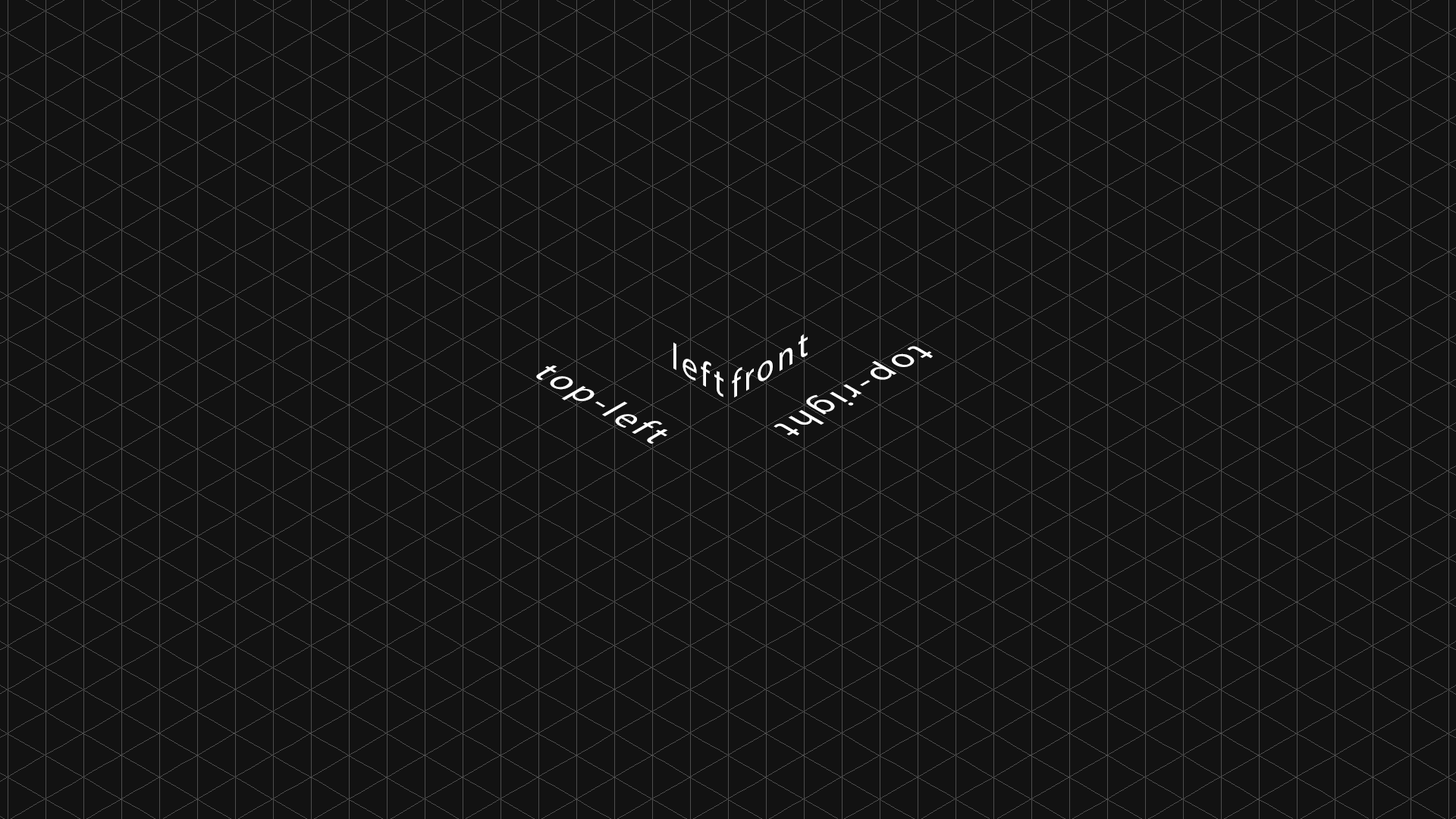
<style>
.page{position:relative;width:1456px;height:819px;background:#121212}
.page>*{position:absolute;margin:0}
.t1{font:36.4px "MyriadPro-Regular";letter-spacing:0.1em;color:#ffffff}
</style>
<div class="page">
<p class="t1" style="left:732px;top:334px;width:76px;height:63px;rotate:-30deg">front</p>
<p class="t1" style="left:673px;top:342px;width:50px;height:55px;rotate:30deg">left</p>
<p class="t1" style="left:773px;top:346px;width:160px;height:90px;rotate:150deg">top-right</p>
<p class="t1" style="left:536px;top:365px;width:132px;height:79px;rotate:30deg">top-left</p>
</div>
